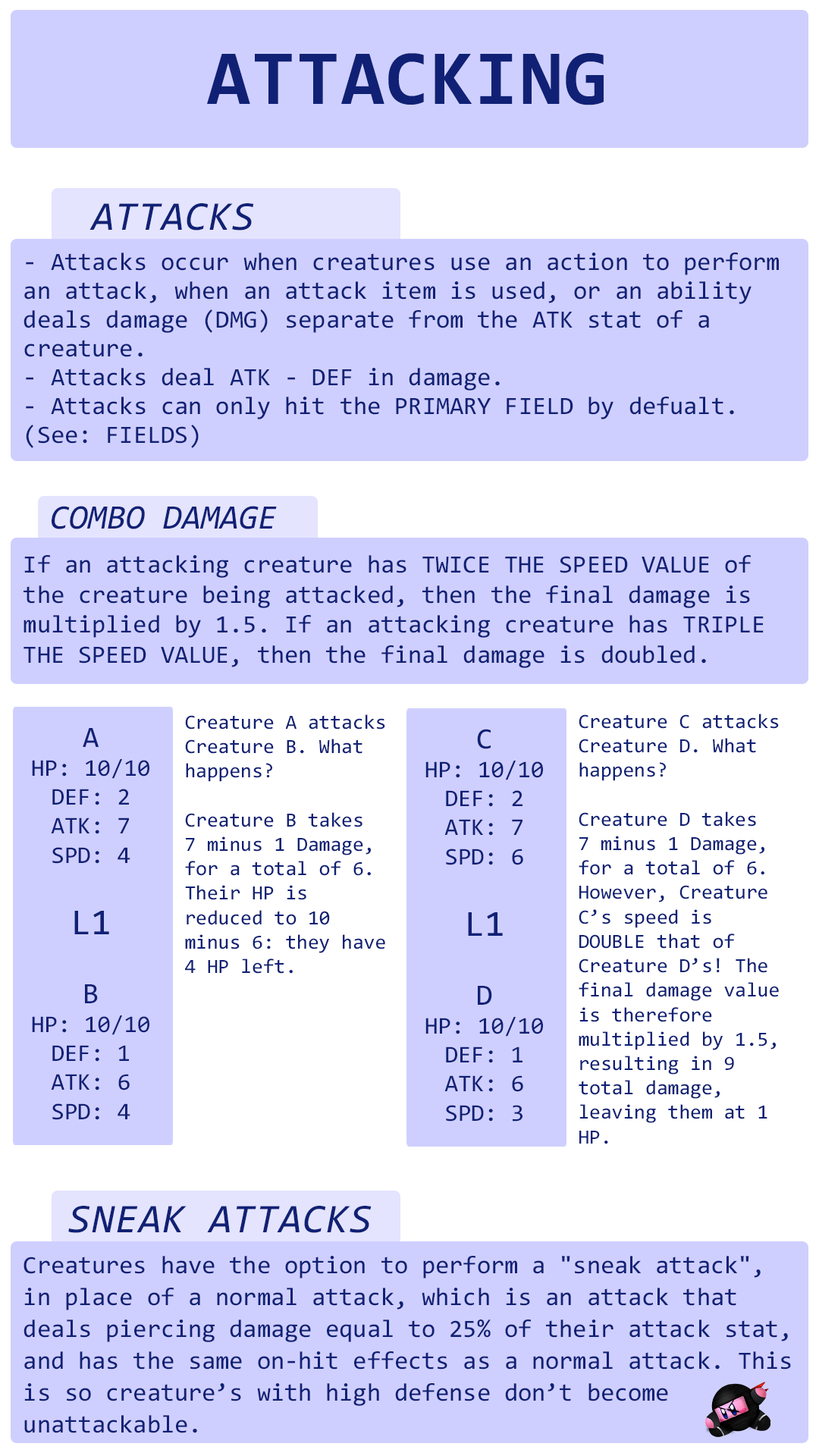
<style>
.page{position:relative;width:819px;height:1456px;background:#cfcfff}
.page>*{position:absolute;margin:0}
.t1{font:78.3px "Consolas-Bold";letter-spacing:0.02em;color:#102175}
.t2{font:41.1px "Consolas-Italic";letter-spacing:0.02em;color:#102175}
.t3{font:25px/28.8px "Consolas";color:#102175}
.t4{font:34.3px "Consolas-Italic";color:#102175}
.t5{font:25px "Consolas";color:#102175}
.t6{font:20.4px "Consolas";color:#102175}
.t7{font:24.1px "Consolas";color:#102175}
.t8{font:29.6px "Consolas";color:#102175}
.t9{font:37px "Consolas";color:#102175}
.t10{font:25px/31.8px "Consolas";color:#102175}
</style>
<div class="page">
<p class="t1" style="left:207px;top:53px;width:397px;height:52px">ATTACKING</p>
<p class="t2" style="left:89px;top:203px;width:165px;height:28px">ATTACKS</p>
<p class="t3" style="left:24px;top:253px;width:755px;height:195px">- Attacks occur when creatures use an action to perform an attack, when an attack item is used, or an ability deals damage (DMG) separate from the ATK stat of a creature.<br>- Attacks deal ATK - DEF in damage.<br>- Attacks can only hit the PRIMARY FIELD by defualt. (See: FIELDS)</p>
<p class="t4" style="left:52px;top:506px;width:225px;height:23px">COMBO DAMAGE</p>
<p class="t5" style="left:24px;top:555px;width:740px;height:113px">If an attacking creature has TWICE THE SPEED VALUE of the creature being attacked, then the final damage is multiplied by 1.5. If an attacking creature has TRIPLE THE SPEED VALUE, then the final damage is doubled.</p>
<p class="t6" style="left:579px;top:714px;width:200px;height:430px">Creature C attacks Creature D. What happens?<br><br>Creature D takes <br>7 minus 1 Damage, for a total of 6. However, Creature C’s speed is DOUBLE that of Creature D’s! The final damage value is therefore multiplied by 1.5, resulting in 9 total damage, leaving them at 1 HP.</p>
<p class="t6" style="left:185px;top:714px;width:200px;height:260px">Creature A attacks Creature B. What happens?<br><br>Creature B takes <br>7 minus 1 Damage, for a total of 6. Their HP is reduced to 10 minus 6: they have 4 HP left.</p>
<p class="t7" style="left:32px;top:728px;width:117px;height:136px;text-align:center"><span class="t8">A<br></span>HP: 10/10<br>DEF: 2<br>ATK: 7<br>SPD: 4</p>
<p class="t7" style="left:425px;top:729px;width:118px;height:136px;text-align:center"><span class="t8">C<br></span>HP: 10/10<br>DEF: 2<br>ATK: 7<br>SPD: 6</p>
<p class="t9" style="left:74px;top:911px;width:35px;height:23px">L1</p>
<p class="t9" style="left:468px;top:912px;width:35px;height:24px">L1</p>
<p class="t7" style="left:32px;top:984px;width:117px;height:136px;text-align:center"><span class="t8">B<br></span>HP: 10/10<br>DEF: 1<br>ATK: 6<br>SPD: 4</p>
<p class="t7" style="left:425px;top:986px;width:118px;height:136px;text-align:center"><span class="t8">D<br></span>HP: 10/10<br>DEF: 1<br>ATK: 6<br>SPD: 3</p>
<p class="t2" style="left:68px;top:1206px;width:304px;height:27px">SNEAK ATTACKS</p>
<p class="t10" style="left:24px;top:1256px;width:767px;height:177px">Creatures have the option to perform a "sneak attack", in place of a normal attack, which is an attack that deals piercing damage equal to 25% of their attack stat, and has the same on-hit effects as a normal attack. This is so creature’s with high defense don’t become unattackable.</p>
</div>
